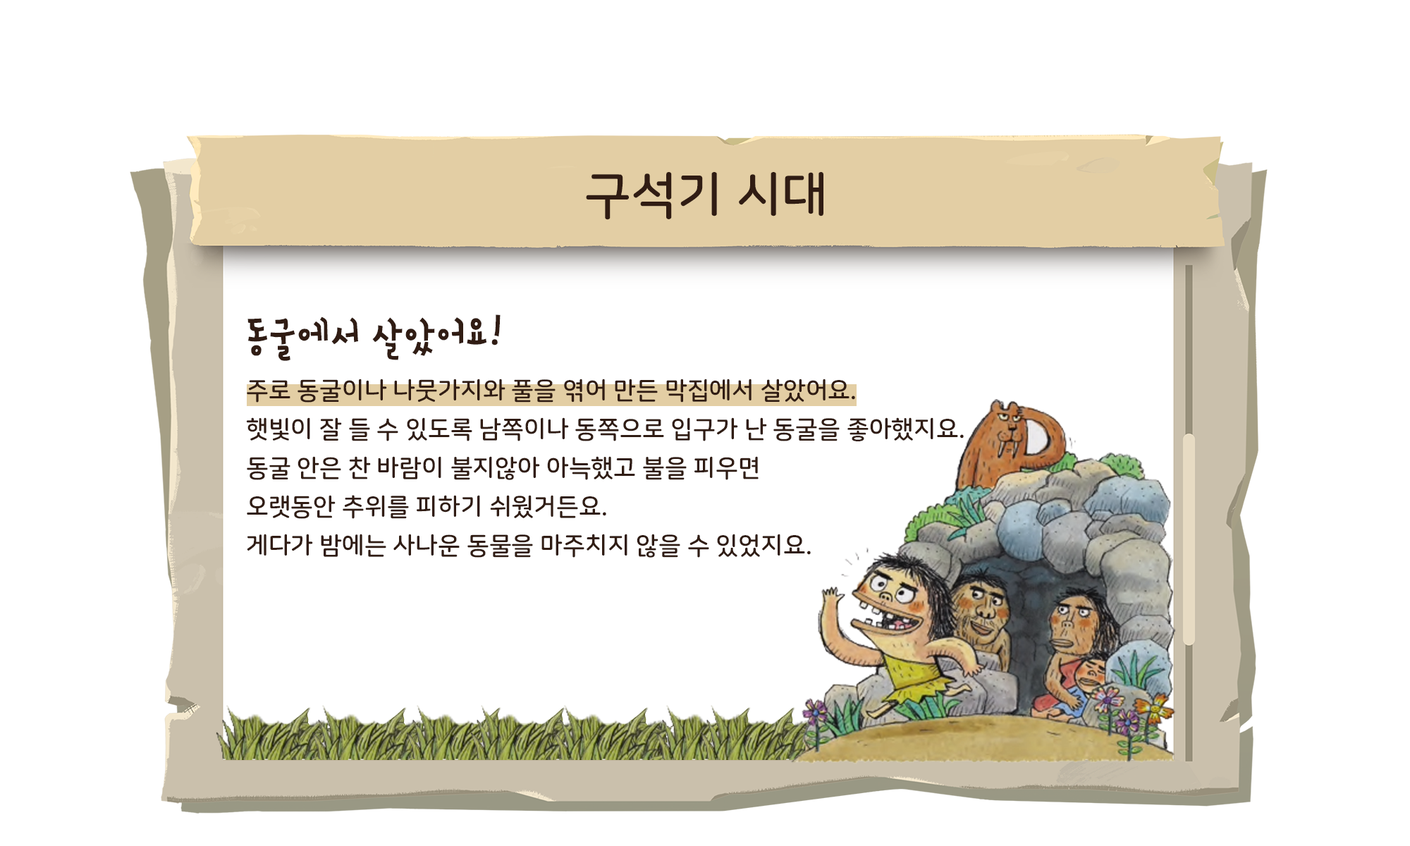
<style>
.page{position:relative;width:1410px;height:846px;background:#ffffff}
.page>*{position:absolute;margin:0}
.t1{font:50.8px "NanumSquareRoundOTFB";color:#301c13}
.t2{font:24.7px/38.8px "NanumSquareRoundOTFB";color:#301c13}
.t3{font:50.8px/64.8px "SDdBYeonpil-cBd";color:#301c13}
</style>
<div class="page">
<p class="t1" style="left:586px;top:172px;width:237px;height:48px">구석기 시대</p>
<p class="t2" style="left:246px;top:314px;width:718px;height:244px"><span class="t3">동굴에서 살았어요!<br></span>주로 동굴이나 나뭇가지와 풀을 엮어 만든 막집에서 살았어요.<br>햇빛이 잘 들 수 있도록 남쪽이나 동쪽으로 입구가 난 동굴을 좋아했지요.<br>동굴 안은 찬 바람이 불지않아 아늑했고 불을 피우면 <br>오랫동안 추위를 피하기 쉬웠거든요.<br>게다가 밤에는 사나운 동물을 마주치지 않을 수 있었지요.</p>
</div>
